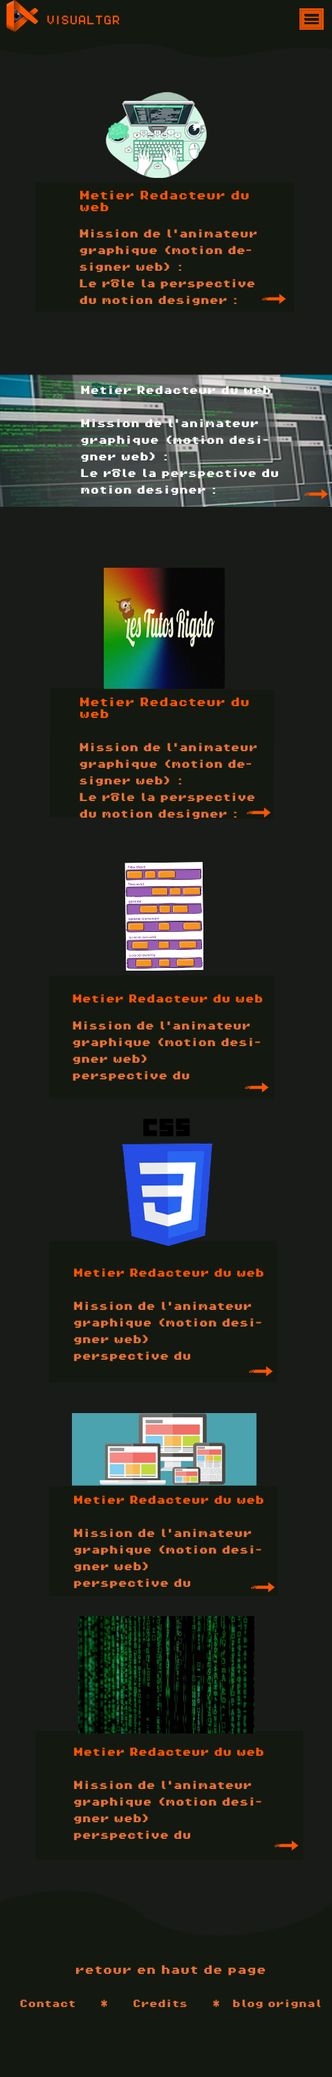
<style>
.page{position:relative;width:332px;height:2077px;background:#191b18}
.page>*{position:absolute;margin:0}
.t1{font:9.7px "PixelOperator8";color:#ff5600}
.t2{font:9px/16.6px "PixelOperator8-Bold";color:#ea7235}
.t3{font:9.7px "PixelOperator8-Bold";color:#ff5600}
.t4{font:9px/12.5px "PixelOperator8-Bold";color:#ea7235}
.t5{font:9.7px/9px "PixelOperator8-Bold";color:#ea7235}
.t6{font:9.7px/9px "PixelOperator8-Bold";color:#131910}
.t7{font:9px/16.6px "PixelOperator8-Bold";color:#ffffff}
.t8{font:7.6px/16.6px "PixelOperator8-Bold";color:#ffffff}
.t9{font:7.6px "PixelOperator8-Bold";color:#ea7235}
.t10{font:7.6px "PixelOperator8-Bold";color:#131910}
.t11{font:7.6px/12.5px "PixelOperator8-Bold";color:#ea7235}
.t12{font:9px "PixelOperator8-Bold";color:#ff5600}
.t13{font:8.3px "PixelOperator8-Bold";color:#ea7235}
.t14{font:9.7px "PixelOperator8-Bold";color:#ea7235}
</style>
<div class="page">
<p class="t1" style="left:47px;top:15px;width:73px;height:10px">VISUALTGR</p>
<p class="t2" style="left:80px;top:190px;width:177px;height:115px"><span class="t3">Metier Redacteur du web<br><br></span>Mission de l'animateur graphique (motion designer web) :<br>Le rôle la perspective du motion designer :<br>L'animation graphique est le métier du motion designer  graphiques <span class="t4">et typo</span><span class="t5">gra l</span><span class="t6">a réalisation</span></p>
<p class="t7" style="left:81px;top:386px;width:197px;height:109px">Metier Redacteur du web<br><br>Mission de l'animateur graphique (motion designer web) :<br>Le rôle la perspective du motion designer :<br><span class="t8">L'animation graphique est le métier du motion desi</span><span class="t9">gner  graphiques et typogra l</span><span class="t10">a réalisation</span></p>
<p class="t2" style="left:80px;top:697px;width:177px;height:122px"><span class="t3">Metier Redacteur du web<br></span><br>Mission de l'animateur graphique (motion designer web) :<br>Le rôle la perspective du motion designer :<br>phique est le métier du motion designer  gra<span class="t11">phiques </span><span class="t9">et typogra l</span><span class="t10">a réalisation</span></p>
<p class="t2" style="left:73px;top:994px;width:189px;height:87px"><span class="t12">Metier Redacteur du web<br><br></span>Mission de l'animateur graphique (motion designer web) <br>perspective du</p>
<p class="t2" style="left:74px;top:1268px;width:190px;height:93px"><span class="t12">Metier Redacteur du web<br></span><br>Mission de l'animateur graphique (motion designer web) <br>perspective du</p>
<p class="t2" style="left:74px;top:1495px;width:190px;height:93px"><span class="t12">Metier Redacteur du web<br></span><br>Mission de l'animateur graphique (motion designer web) <br>perspective du</p>
<p class="t2" style="left:74px;top:1747px;width:190px;height:93px"><span class="t12">Metier Redacteur du web<br></span><br>Mission de l'animateur graphique (motion designer web) <br>perspective du</p>
<p class="t13" style="left:20px;top:1965px;width:301px;height:43px;text-align:center"><span class="t14">retour en haut de page<br><br> <br></span>Contact      *      Credits      *   blog orignal</p>
</div>
